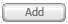
<style>
.page{position:relative;width:68px;height:24px;background:#ffffff}
.page>*{position:absolute;margin:0}
.t1{font:11px "Tahoma";color:#6c6c6c}
</style>
<div class="page">
<p class="t1" style="left:25px;top:7px;width:19px;height:9px">Add</p>
</div>
